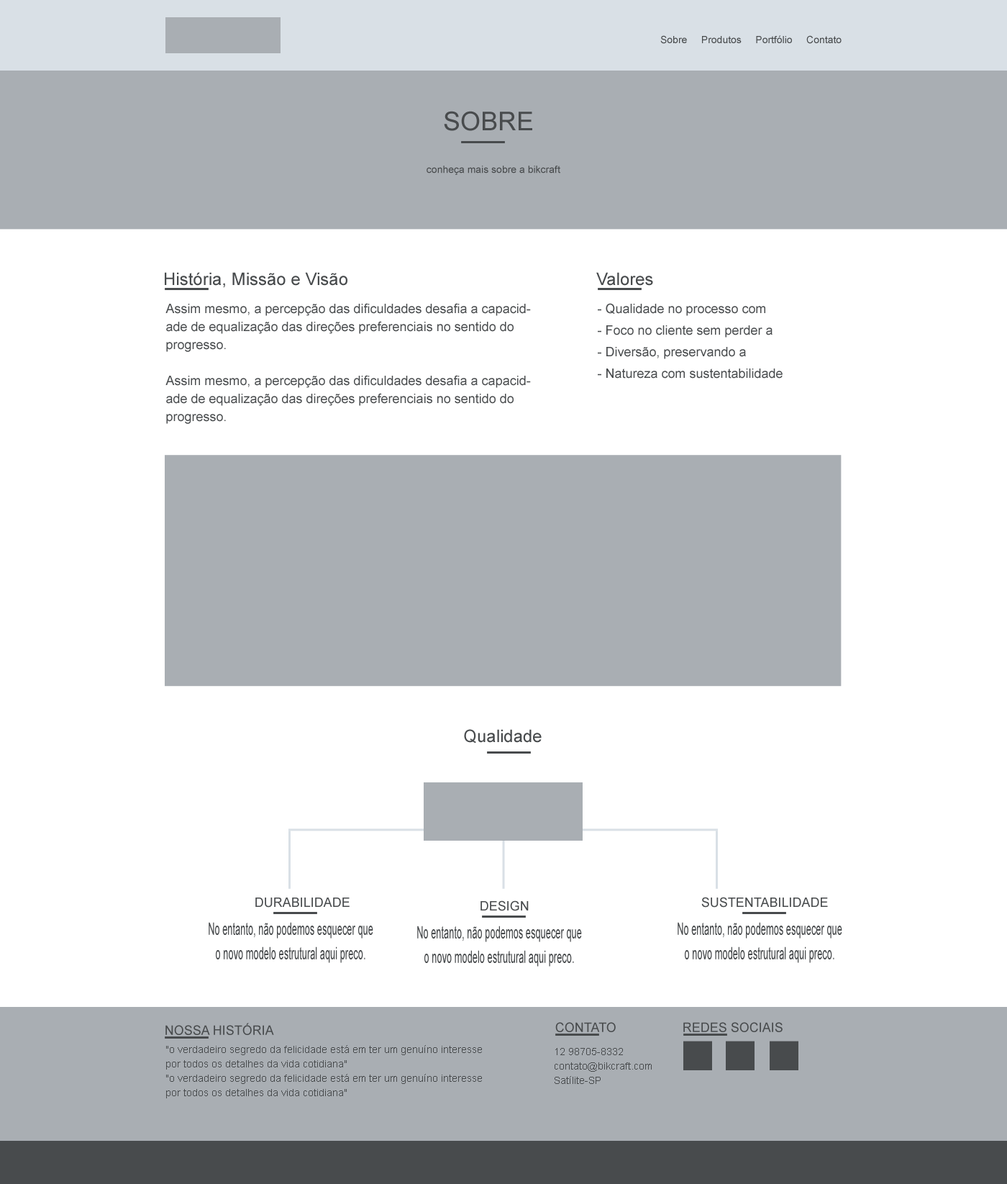
<style>
.page{position:relative;width:1007px;height:1184px;background:#ffffff}
.page>*{position:absolute;margin:0}
.t1{font:10.1px "ArialMT";color:#484b4d}
.t2{font:25.9px "ArialMT";color:#484b4d;text-transform:uppercase}
.t3{font:17.3px "ArialMT";color:#484b4d}
.t4{font:13px/18px "ArialMT";color:#484b4d}
.t5{font:13px/21.6px "ArialMT";color:#484b4d}
.t6{font:13px "ArialMT";color:#484b4d;text-transform:uppercase}
.t7{font:13px "ArialMT";color:#484b4d}
.t8{font:17.1px/24.5px "ArialMT";color:#484b4d;scale:0.54 1}
.t9{font:10.1px/14.4px "ArialMT";color:#484b4d}
</style>
<div class="page">
<p class="t1" style="left:661px;top:35px;width:181px;height:9px">Sobre     Produtos     Portfólio     Contato</p>
<p class="t2" style="left:444px;top:111px;width:88px;height:20px">sobre</p>
<p class="t1" style="left:427px;top:165px;width:134px;height:10px">conheça mais sobre a bikcraft</p>
<p class="t3" style="left:165px;top:272px;width:183px;height:16px">História, Missão e Visão</p>
<p class="t3" style="left:597px;top:272px;width:56px;height:14px">Valores</p>
<p class="t4" style="left:165px;top:303px;width:366px;height:121px">Assim mesmo, a percepção das dificuldades desafia a capacidade de equalização das direções preferenciais no sentido do progresso.<br><br>Assim mesmo, a percepção das dificuldades desafia a capacidade de equalização das direções preferenciais no sentido do progresso.</p>
<p class="t5" style="left:598px;top:303px;width:185px;height:75px">- Qualidade no processo com <br>- Foco no cliente sem perder a<br>- Diversão, preservando a<br>- Natureza com sustentabilidade</p>
<p class="t3" style="left:464px;top:729px;width:78px;height:14px">Qualidade</p>
<p class="t6" style="left:255px;top:897px;width:95px;height:10px">Durabilidade</p>
<p class="t7" style="left:481px;top:900px;width:48px;height:11px">DESIGN</p>
<p class="t7" style="left:702px;top:897px;width:126px;height:10px">SUSTENTABILIDADE</p>
<p class="t8" style="left:209px;top:922px;width:164px;height:41px;text-align:center">No entanto, não podemos esquecer que o novo modelo estrutural aqui preco.<br><br>aqui precoaqui precoaqui preco</p>
<p class="t8" style="left:417px;top:925px;width:165px;height:41px;text-align:center">No entanto, não podemos esquecer que o novo modelo estrutural aqui preco.<br><br>aqui precoaqui precoaqui preco</p>
<p class="t8" style="left:678px;top:922px;width:165px;height:41px;text-align:center">No entanto, não podemos esquecer que o novo modelo estrutural aqui preco.<br><br>aqui precoaqui precoaqui preco</p>
<p class="t6" style="left:165px;top:1023px;width:109px;height:12px">Nossa História</p>
<p class="t6" style="left:556px;top:1022px;width:60px;height:10px">contato</p>
<p class="t6" style="left:684px;top:1022px;width:99px;height:10px">REDES SOCIAIS</p>
<p class="t9" style="left:166px;top:1045px;width:316px;height:53px;text-align:center">"o verdadeiro segredo da felicidade está em ter um genuíno interesse por todos os detalhes da vida cotidiana"<br>"o verdadeiro segredo da felicidade está em ter um genuíno interesse por todos os detalhes da vida cotidiana"</p>
<p class="t9" style="left:555px;top:1048px;width:97px;height:36px">12 98705-8332<br>contato@bikcraft.com<br>Satílite-SP</p>
</div>
